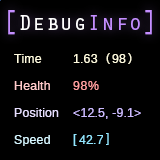
<style>
.page{position:relative;width:160px;height:160px;background:#000000}
.page>*{position:absolute;margin:0}
.t1{font:33.6px "OratorStd";color:#c48eff;scale:0.69 1}
.t2{font:21.8px "OratorStd";color:#ffffff;scale:1.06 1}
.t3{font:21.8px "OratorStd";color:#c48eff;scale:1.06 1}
.t4{font:12px "LiberationSansNarrow";color:#fffbdf;scale:1.29 1}
.t5{font:12px "LiberationSansNarrow";color:#ffcaca;scale:1.29 1}
.t6{font:12px "LiberationSansNarrow";letter-spacing:0.03em;color:#ff9f9f;scale:1.29 1}
.t7{font:12px "LiberationSansNarrow";color:#e7dfff;scale:1.29 1}
.t8{font:12px "LiberationSansNarrow";color:#cdbcff;scale:1.29 1}
.t9{font:12px "LiberationSansNarrow";color:#d6f6ff;scale:1.29 1}
.t10{font:12px "LiberationSansNarrow";color:#94e7ff;scale:1.29 1}
</style>
<div class="page">
<p class="t1" style="left:8px;top:10px;width:7px;height:25px">[</p>
<p class="t2" style="left:20px;top:15px;width:120px;height:15px">Debug<span class="t3">Info</span></p>
<p class="t1" style="left:145px;top:10px;width:7px;height:25px">]</p>
<p class="t4" style="left:14px;top:54px;width:28px;height:9px">Time</p>
<p class="t4" style="left:73px;top:54px;width:25px;height:9px">1.63</p>
<p class="t4" style="left:106px;top:53px;width:4px;height:11px">(</p>
<p class="t4" style="left:112px;top:54px;width:14px;height:9px">98</p>
<p class="t4" style="left:128px;top:53px;width:4px;height:11px">)</p>
<p class="t5" style="left:14px;top:81px;width:36px;height:9px">Health</p>
<p class="t6" style="left:73px;top:81px;width:26px;height:9px">98%</p>
<p class="t7" style="left:14px;top:108px;width:45px;height:9px">Position</p>
<p class="t8" style="left:73px;top:108px;width:68px;height:11px">&lt;12.5, -9.1&gt;</p>
<p class="t9" style="left:14px;top:135px;width:36px;height:11px">Speed</p>
<p class="t10" style="left:73px;top:134px;width:4px;height:12px">[</p>
<p class="t10" style="left:79px;top:135px;width:24px;height:9px">42.7</p>
<p class="t10" style="left:106px;top:133px;width:3px;height:12px">]</p>
</div>
